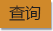
<style>
.page{position:relative;width:53px;height:31px;background:#d0892a}
.page>*{position:absolute;margin:0}
.t1{font:16px "MicrosoftYaHei";color:#1d1d1e}
</style>
<div class="page">
<p class="t1" style="left:9px;top:5px;width:32px;height:16px">查询</p>
</div>
